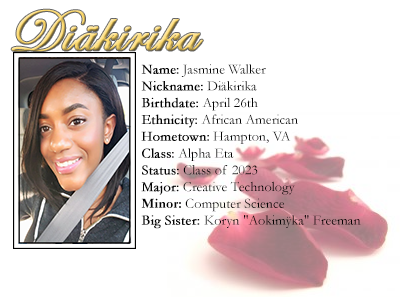
<style>
.page{position:relative;width:400px;height:300px;background:#ffffff}
.page>*{position:absolute;margin:0}
.t1{font:60px "EdwardianScriptITC";font-weight:bold}
.t2{font:14px "Garamond";color:#000000}
.t3{font:14px "Garamond";color:#000000;font-weight:bold}
.t4{font:14px "Garamond-Bold";color:#000000}
</style>
<div class="page">
<p class="t1" style="left:11px;top:9px;width:192px;height:43px">Diäkirika</p>
<p class="t2" style="left:141px;top:64px;width:220px;height:165px"><span class="t3">Name:</span> Jasmine Walker<br><span class="t3">Nickname:</span> Diäkirika<br><span class="t3">Birthdate:</span> April 26th<br><span class="t3">Ethnicity:</span> African American<br><span class="t3">Hometown:</span> Hampton, VA<br><span class="t3">Class:</span> Alpha Eta<br><span class="t3">Status:</span> Class of 2023<br><span class="t3">Major:</span> Creative Technology<br><span class="t4">Minor:</span> Computer Science<br><span class="t3">Big Sister: </span>Koryn "Aokimÿka" Freeman</p>
</div>
